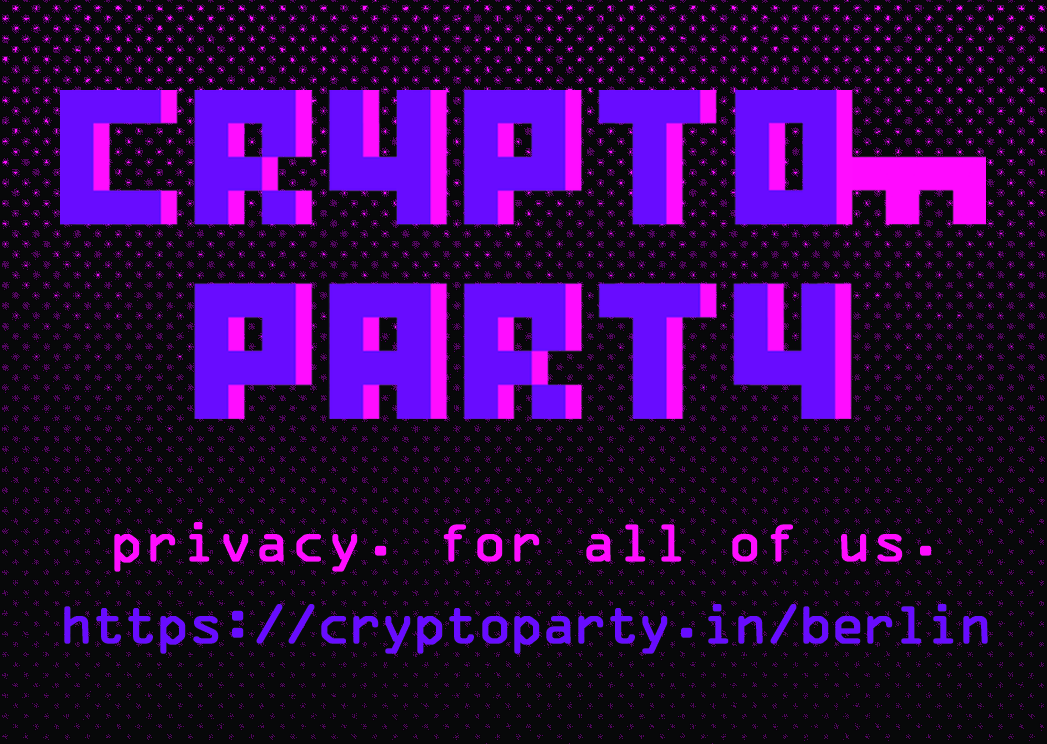
<style>
.page{position:relative;width:1047px;height:744px;background:#070809}
.page>*{position:absolute;margin:0}
.t1{font:49.6px/41.4px "OCRAStd";letter-spacing:-0.1em;color:#680cff;font-weight:bold}
.t2{font:49.6px/41.4px "OCRAStd";letter-spacing:-0.015em;color:#ff0dff;font-weight:bold}
</style>
<div class="page">
<p class="t1" style="left:64px;top:522px;width:924px;height:132px;text-align:center"><span class="t2">privacy. for all of us.<br><br></span>https://cryptoparty.in/berlin</p>
</div>
